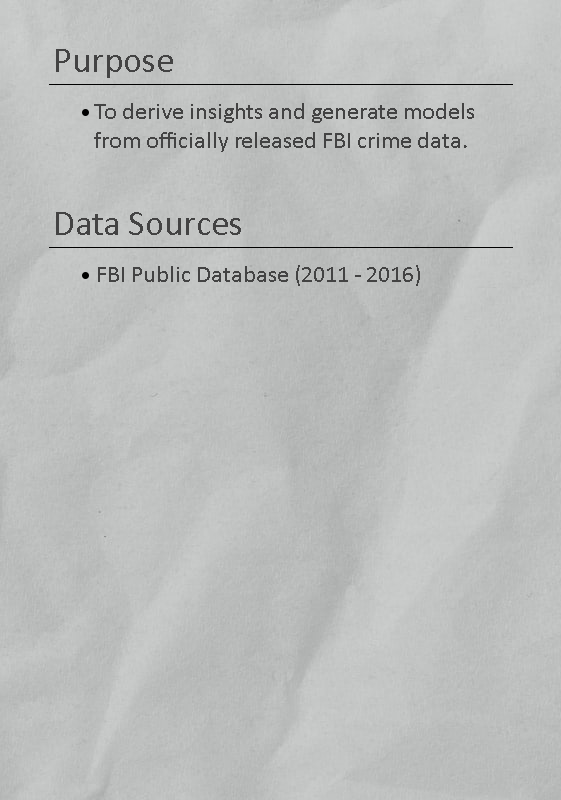
<style>
.page{position:relative;width:561px;height:800px}
.page>*{position:absolute;margin:0}
.t1{font:36px "Calibri";color:#434343}
.t2{font:24px "Calibri";color:#434343}
</style>
<div class="page">
<p class="t1" style="left:56px;top:49px;width:117px;height:29px">Purpose</p>
<p class="t2" style="left:94px;top:103px;width:380px;height:49px">To derive insights and generate models <br>from officially released FBI crime data.</p>
<p class="t1" style="left:56px;top:212px;width:185px;height:23px">Data Sources</p>
<p class="t2" style="left:98px;top:265px;width:322px;height:21px">FBI Public Database (2011 - 2016)</p>
</div>
